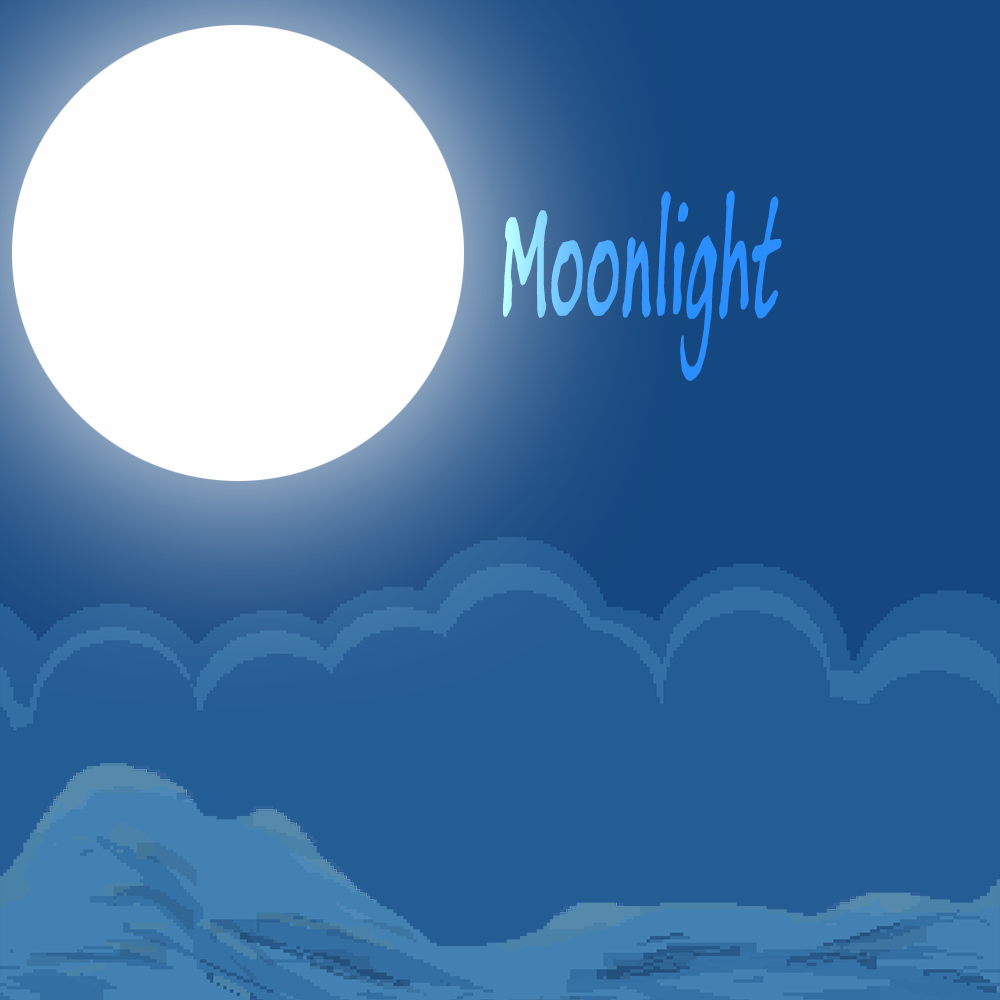
<style>
.page{position:relative;width:1000px;height:1000px;background:#245c94}
.page>*{position:absolute;margin:0}
.t1{font:173.2px "BuxtonSketch";font-style:italic;scale:0.45 1}
</style>
<div class="page">
<p class="t1" style="left:503px;top:190px;width:279px;height:191px">Moonlight</p>
</div>
